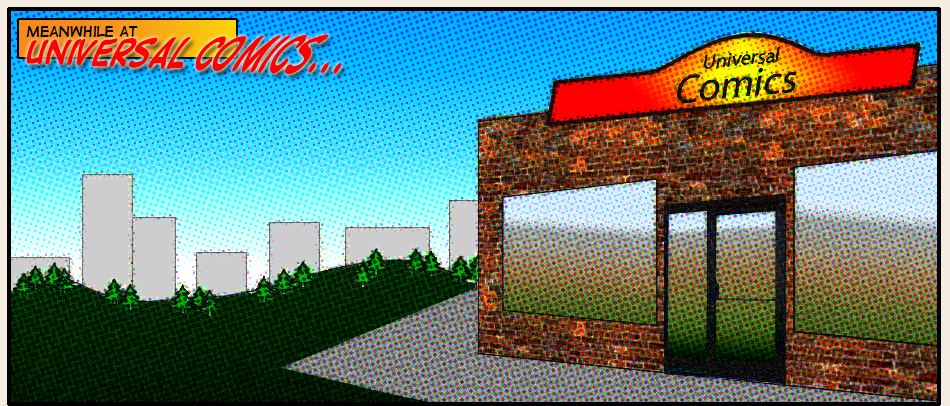
<style>
.page{position:relative;width:950px;height:406px}
.page>*{position:absolute;margin:0}
.t1{font:14px "DigitalStrip";color:#000000}
.t2{font:25px "DigitalStripBold";color:#ff0000}
</style>
<div class="page">
<p class="t1" style="left:26px;top:26px;width:112px;height:11px">Meanwhile at</p>
<p class="t2" style="left:26px;top:34px;width:316px;height:40px">Universal Comics...</p>
</div>
